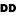
<style>
.page{position:relative;width:16px;height:16px;background:#ffffff}
.page>*{position:absolute;margin:0}
.t1{font:12px "FranklinGothic-Heavy";color:#000000}
</style>
<div class="page">
<p class="t1" style="left:0px;top:4px;width:16px;height:8px">DD</p>
</div>
